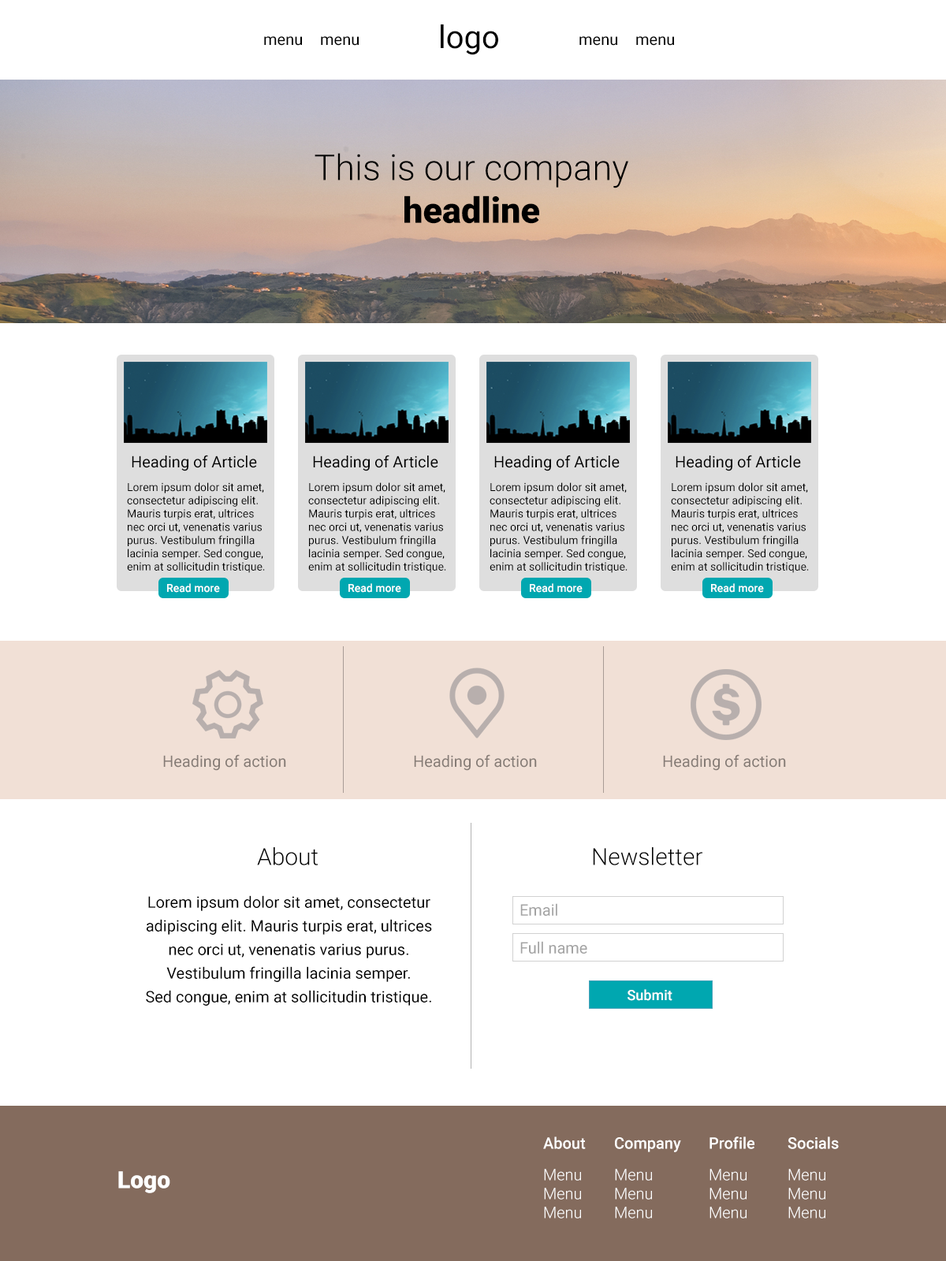
<style>
.page{position:relative;width:946px;height:1261px;background:#ffffff}
.page>*{position:absolute;margin:0}
.t1{font:31.5px "Roboto-Regular";color:#000000}
.t2{font:15.8px "Roboto-Regular";color:#000000}
.t3{font:35.6px "Roboto-Light";color:#000000}
.t4{font:35.6px "Roboto-Black";color:#000000}
.t5{font:11px "Roboto-Regular";color:#000000}
.t6{font:11px "Roboto-Medium";color:#ffffff}
.t7{font:15.8px "Roboto-Regular";color:#857b75}
.t8{font:23.6px "Roboto-Light";color:#000000}
.t9{font:15.8px/23.6px "Roboto-Regular";color:#000000}
.t10{font:15.8px "Roboto-Regular";color:#a3a3a3}
.t11{font:14.2px "Roboto-Medium";color:#ffffff}
.t12{font:15.8px "Roboto-Medium";color:#ffffff}
.t13{font:15.8px/18.9px "Roboto-Light";color:#ffffff}
.t14{font:15.8px "Roboto-Light";color:#ffffff}
.t15{font:23.6px "Roboto-Black";color:#ffffff}
</style>
<div class="page">
<p class="t1" style="left:441px;top:24px;width:57px;height:31px">logo</p>
<p class="t2" style="left:264px;top:36px;width:95px;height:10px">menu menu</p>
<p class="t2" style="left:579px;top:36px;width:95px;height:10px">menu menu</p>
<p class="t3" style="left:314px;top:153px;width:314px;height:71px;text-align:center">This is our company<br><span class="t4">headline</span></p>
<p class="t2" style="left:132px;top:455px;width:125px;height:16px">Heading of Article</p>
<p class="t2" style="left:313px;top:455px;width:125px;height:16px">Heading of Article</p>
<p class="t2" style="left:494px;top:455px;width:125px;height:16px">Heading of Article</p>
<p class="t2" style="left:675px;top:455px;width:126px;height:16px">Heading of Article</p>
<p class="t5" style="left:127px;top:482px;width:138px;height:91px">Lorem ipsum dolor sit amet, <br>consectetur adipiscing elit. <br>Mauris turpis erat, ultrices <br>nec orci ut, venenatis varius <br>purus. Vestibulum fringilla <br>lacinia semper. Sed congue, <br>enim at sollicitudin tristique.</p>
<p class="t5" style="left:308px;top:482px;width:138px;height:91px">Lorem ipsum dolor sit amet, <br>consectetur adipiscing elit. <br>Mauris turpis erat, ultrices <br>nec orci ut, venenatis varius <br>purus. Vestibulum fringilla <br>lacinia semper. Sed congue, <br>enim at sollicitudin tristique.</p>
<p class="t5" style="left:489px;top:482px;width:138px;height:91px">Lorem ipsum dolor sit amet, <br>consectetur adipiscing elit. <br>Mauris turpis erat, ultrices <br>nec orci ut, venenatis varius <br>purus. Vestibulum fringilla <br>lacinia semper. Sed congue, <br>enim at sollicitudin tristique.</p>
<p class="t5" style="left:671px;top:482px;width:138px;height:91px">Lorem ipsum dolor sit amet, <br>consectetur adipiscing elit. <br>Mauris turpis erat, ultrices <br>nec orci ut, venenatis varius <br>purus. Vestibulum fringilla <br>lacinia semper. Sed congue, <br>enim at sollicitudin tristique.</p>
<p class="t6" style="left:167px;top:583px;width:53px;height:10px">Read more</p>
<p class="t6" style="left:348px;top:583px;width:53px;height:10px">Read more</p>
<p class="t6" style="left:530px;top:583px;width:52px;height:10px">Read more</p>
<p class="t6" style="left:711px;top:583px;width:53px;height:10px">Read more</p>
<p class="t7" style="left:163px;top:754px;width:123px;height:17px">Heading of action</p>
<p class="t7" style="left:414px;top:754px;width:123px;height:17px">Heading of action</p>
<p class="t7" style="left:663px;top:754px;width:123px;height:17px">Heading of action</p>
<p class="t8" style="left:257px;top:847px;width:61px;height:18px">About</p>
<p class="t8" style="left:593px;top:847px;width:109px;height:18px">Newsletter</p>
<p class="t9" style="left:146px;top:895px;width:286px;height:111px;text-align:center">Lorem ipsum dolor sit amet, consectetur <br>adipiscing elit. Mauris turpis erat, ultrices <br>nec orci ut, venenatis varius purus. <br>Vestibulum fringilla lacinia semper. <br>Sed congue, enim at sollicitudin tristique.</p>
<p class="t10" style="left:520px;top:903px;width:37px;height:13px">Email</p>
<p class="t10" style="left:520px;top:941px;width:67px;height:13px">Full name</p>
<p class="t11" style="left:627px;top:989px;width:45px;height:12px">Submit</p>
<p class="t12" style="left:543px;top:1136px;width:43px;height:13px">About</p>
<p class="t12" style="left:615px;top:1137px;width:66px;height:15px">Company</p>
<p class="t12" style="left:709px;top:1136px;width:45px;height:13px">Profile</p>
<p class="t12" style="left:787px;top:1136px;width:52px;height:13px">Socials</p>
<p class="t13" style="left:544px;top:1169px;width:37px;height:49px">Menu<br>Menu<br>Menu</p>
<p class="t14" style="left:615px;top:1169px;width:37px;height:49px">Menu<br>Menu<br>Menu</p>
<p class="t14" style="left:709px;top:1169px;width:37px;height:49px">Menu<br>Menu<br>Menu</p>
<p class="t14" style="left:788px;top:1169px;width:37px;height:49px">Menu<br>Menu<br>Menu</p>
<p class="t15" style="left:118px;top:1171px;width:52px;height:22px">Logo</p>
</div>
